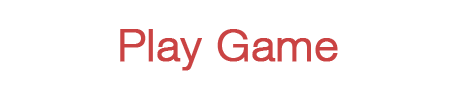
<style>
.page{position:relative;width:450px;height:90px;background:#ffffff}
.page>*{position:absolute;margin:0}
.t1{font:45px "HelveticaNeueLTCom-Lt";color:#ca4343;font-weight:bold}
</style>
<div class="page">
<p class="t1" style="left:120px;top:29px;width:218px;height:42px">Play Game</p>
</div>
